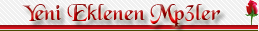
<style>
.page{position:relative;width:259px;height:31px}
.page>*{position:absolute;margin:0}
.t1{font:24px "Black-Regular"}
</style>
<div class="page">
<p class="t1" style="left:22px;top:4px;width:199px;height:24px">Yeni Eklenen Mp3ler</p>
</div>
